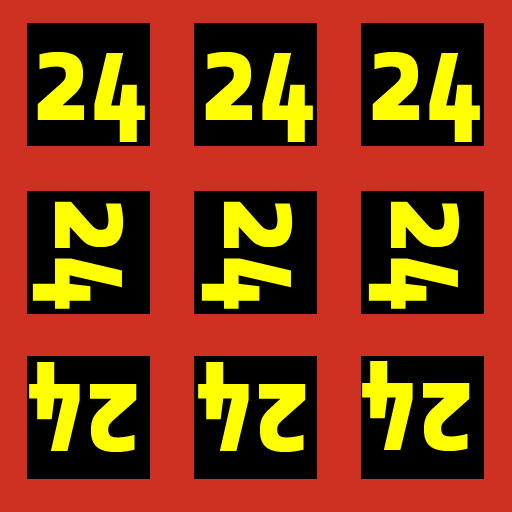
<style>
.page{position:relative;width:512px;height:512px;background:#ce3122}
.page>*{position:absolute;margin:0}
.t1{font:130px "Share-BoldOSF";color:#ffff00}
</style>
<div class="page">
<p class="t1" style="left:37px;top:51px;width:108px;height:92px">24</p>
<p class="t1" style="left:205px;top:51px;width:108px;height:92px">24</p>
<p class="t1" style="left:372px;top:51px;width:108px;height:92px">24</p>
<p class="t1" style="left:32px;top:201px;width:92px;height:108px;rotate:90deg">24</p>
<p class="t1" style="left:201px;top:201px;width:92px;height:108px;rotate:90deg">24</p>
<p class="t1" style="left:368px;top:201px;width:92px;height:108px;rotate:90deg">24</p>
<p class="t1" style="left:29px;top:361px;width:108px;height:92px;rotate:-180deg">24</p>
<p class="t1" style="left:198px;top:361px;width:108px;height:92px;rotate:-180deg">24</p>
<p class="t1" style="left:362px;top:360px;width:108px;height:92px;rotate:-180deg">24</p>
</div>
